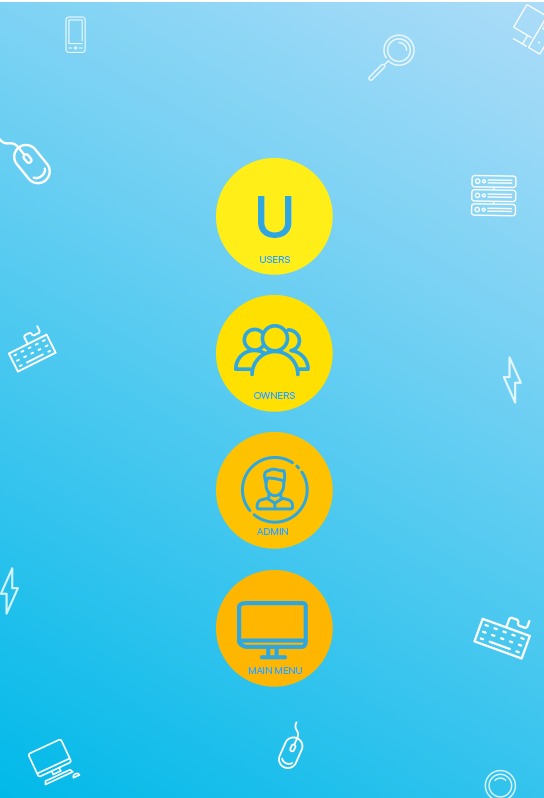
<style>
.page{position:relative;width:544px;height:798px}
.page>*{position:absolute;margin:0}
.t1{font:58.8px "SFUIDisplay-Medium";color:#2ea7e0;text-transform:uppercase}
.t2{font:10.1px "SFUIDisplay-Regular";color:#2ea7e0;text-transform:uppercase}
</style>
<div class="page">
<p class="t1" style="left:258px;top:196px;width:34px;height:42px">U</p>
<p class="t2" style="left:260px;top:256px;width:30px;height:7px">users</p>
<p class="t2" style="left:254px;top:392px;width:41px;height:7px">owners</p>
<p class="t2" style="left:257px;top:528px;width:31px;height:7px">admin</p>
<p class="t2" style="left:248px;top:667px;width:54px;height:7px">main menu</p>
</div>
